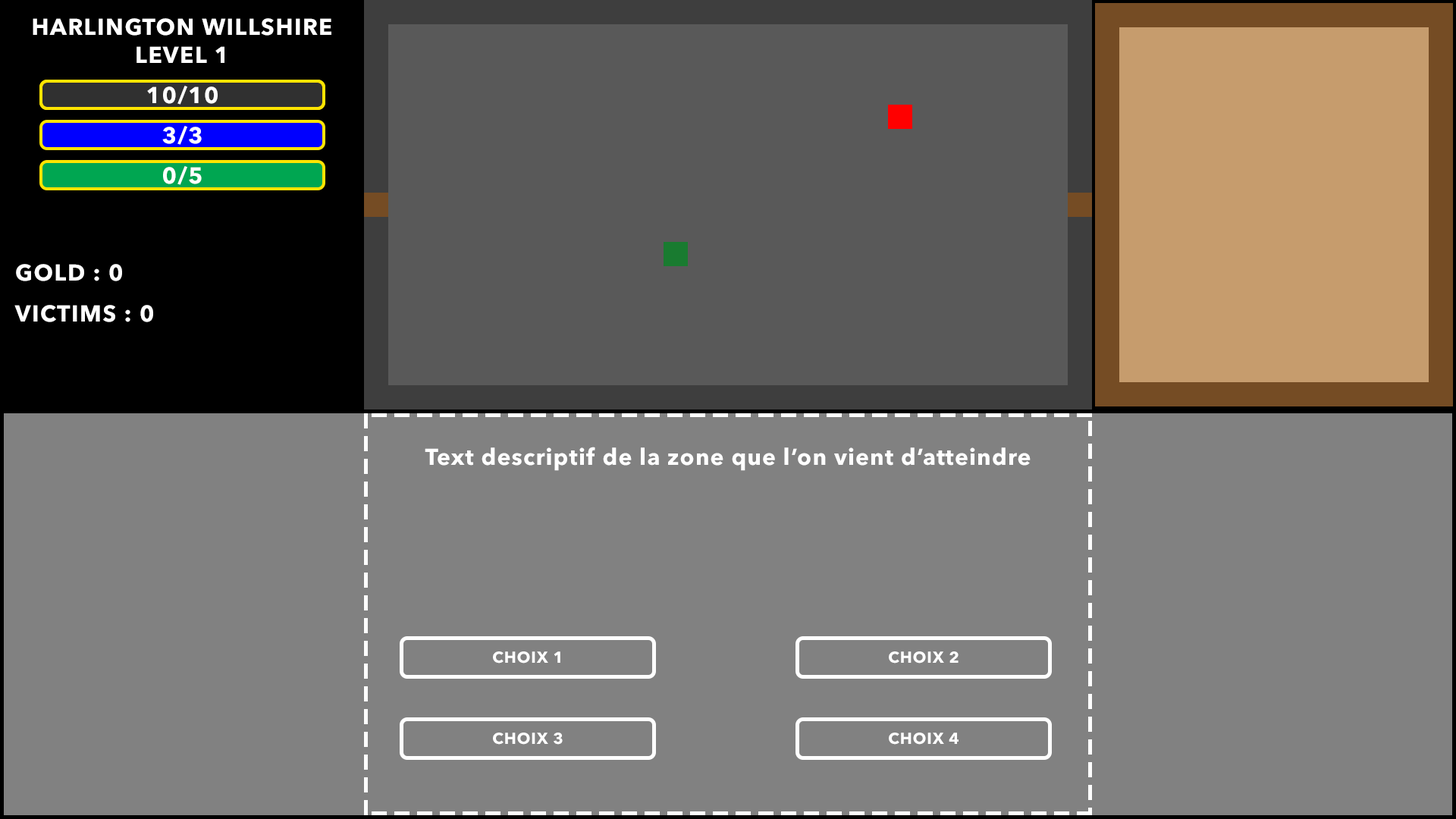
<style>
.page{position:relative;width:1456px;height:819px;background:#818181}
.page>*{position:absolute;margin:0}
.t1{font:22.7px "AvenirNextLTPro-Bold";letter-spacing:0.05em;color:#ffffff;text-transform:uppercase}
.t2{font:22.7px "AvenirNextLTPro-Bold";letter-spacing:0.04em;color:#ffffff}
.t3{font:27.3px "AvenirNextLTPro-Bold";letter-spacing:0.04em;color:#ffffff}
</style>
<div class="page">
<p class="t1" style="left:33px;top:18px;width:298px;height:18px">Harlington Willshire</p>
<p class="t1" style="left:136px;top:46px;width:88px;height:17px">level 1</p>
<p class="t1" style="left:147px;top:86px;width:71px;height:19px">10/10</p>
<p class="t1" style="left:162px;top:126px;width:40px;height:19px">3/3</p>
<p class="t1" style="left:163px;top:166px;width:39px;height:19px">0/5</p>
<p class="t1" style="left:16px;top:264px;width:106px;height:17px">Gold : 0</p>
<p class="t1" style="left:14px;top:305px;width:139px;height:17px">victims : 0</p>
<p class="t2" style="left:425px;top:447px;width:606px;height:24px">Text descriptif de la zone que l’on vient d’atteindre</p>
<p class="t3" style="left:493px;top:651px;width:67px;height:13px">CHOIX 1</p>
<p class="t3" style="left:889px;top:651px;width:70px;height:13px">CHOIX 2</p>
<p class="t3" style="left:493px;top:733px;width:70px;height:12px">CHOIX 3</p>
<p class="t3" style="left:889px;top:733px;width:70px;height:12px">CHOIX 4</p>
</div>
